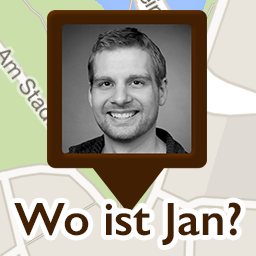
<style>
.page{position:relative;width:256px;height:256px}
.page>*{position:absolute;margin:0}
.t1{font:47px "GillSans-SemiBold";color:#401f02}
</style>
<div class="page">
<p class="t1" style="left:14px;top:202px;width:227px;height:43px">Wo ist Jan?</p>
</div>
